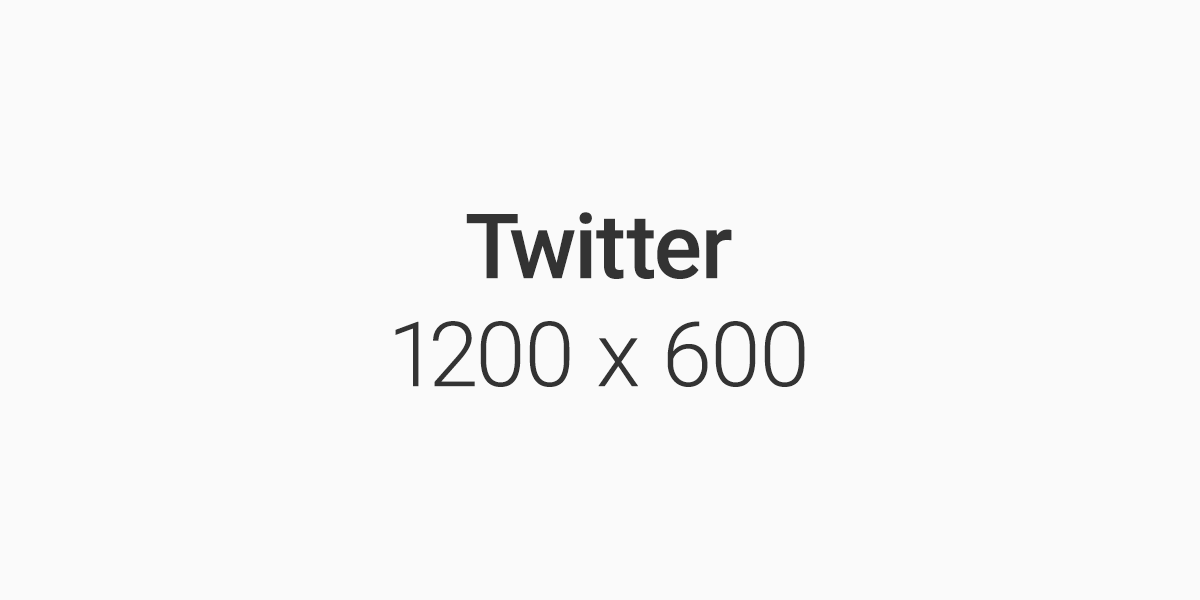
<style>
.page{position:relative;width:1200px;height:600px;background:#fafafa}
.page>*{position:absolute;margin:0}
.t1{font:90px "Roboto-Light";color:#333333}
.t2{font:90px "Roboto-Medium";color:#333333}
</style>
<div class="page">
<p class="t1" style="left:395px;top:212px;width:410px;height:175px;text-align:center"><span class="t2">Twitter<br></span>1200 x 600</p>
</div>
